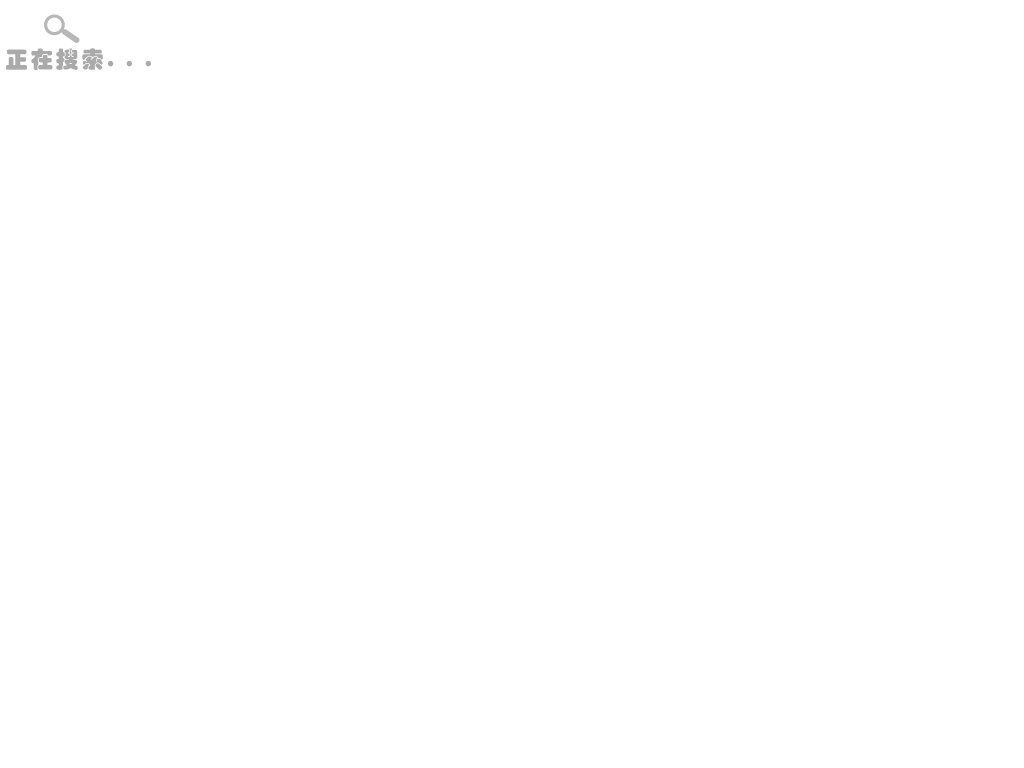
<style>
.page{position:relative;width:1024px;height:768px;background:#ffffff}
.page>*{position:absolute;margin:0}
.t1{font:23px "STHupo";letter-spacing:0.1em;color:#aaaaaa}
</style>
<div class="page">
<p class="t1" style="left:6px;top:48px;width:145px;height:22px">正在搜索. . .</p>
</div>
